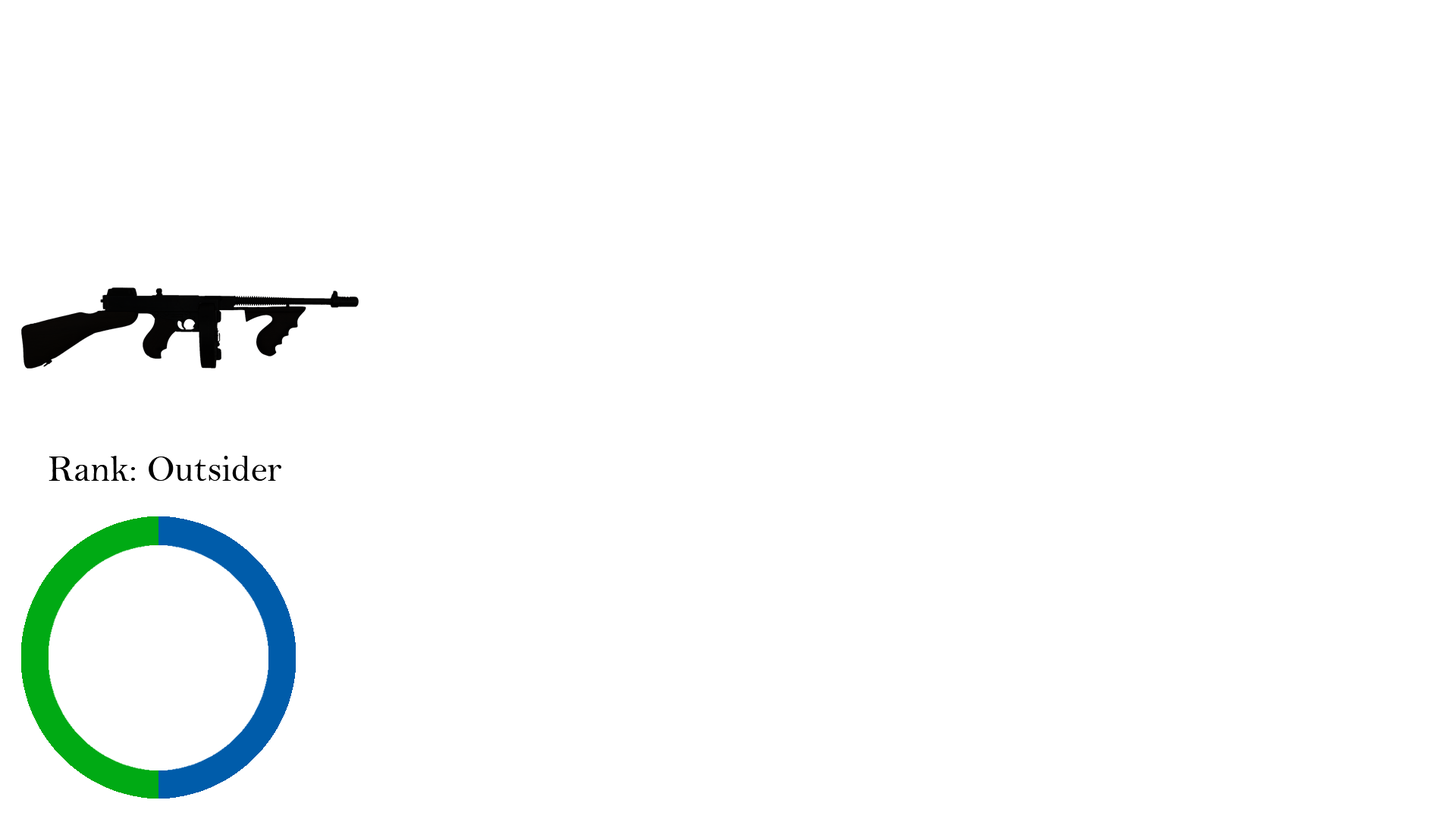
<style>
.page{position:relative;width:1456px;height:819px;background:#ffffff}
.page>*{position:absolute;margin:0}
.t1{font:37.9px "BellMT";color:#000000}
</style>
<div class="page">
<p class="t1" style="left:49px;top:456px;width:232px;height:26px">Rank: Outsider</p>
</div>
